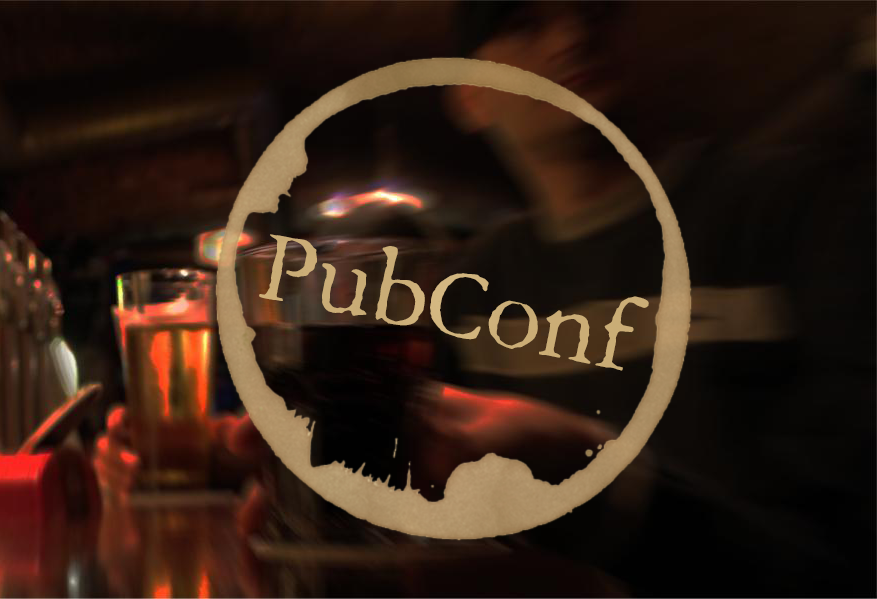
<style>
.page{position:relative;width:877px;height:599px}
.page>*{position:absolute;margin:0}
.t1{font:93px "Aquifer";color:#daa26b}
</style>
<div class="page">
<p class="t1" style="left:259px;top:234px;width:390px;height:137px;rotate:11deg;opacity:0.85">PubConf</p>
</div>
